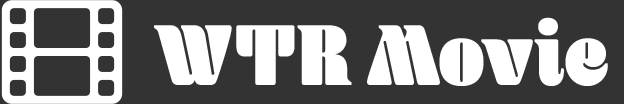
<style>
.page{position:relative;width:624px;height:104px;background:#333333}
.page>*{position:absolute;margin:0}
.t1{font:90px "Blenny-Black";color:#ffffff;scale:0.85 1}
</style>
<div class="page">
<p class="t1" style="left:154px;top:17px;width:454px;height:69px">WTR Movie</p>
</div>
